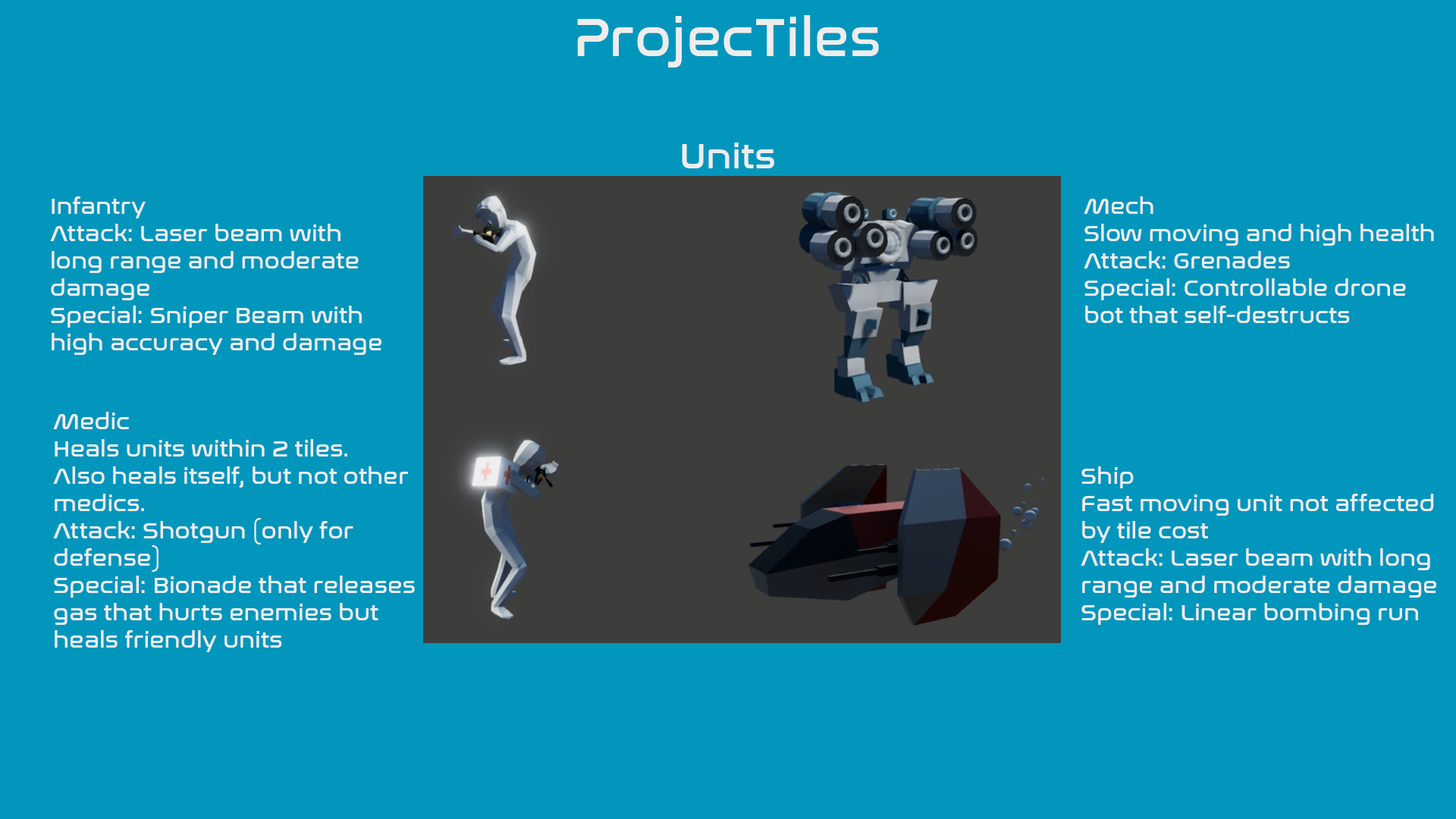
<style>
.page{position:relative;width:1456px;height:819px;background:#0296bd}
.page>*{position:absolute;margin:0}
.t1{font:54.6px "NasalizationRg-Regular";color:#ededed}
.t2{font:36.4px "NasalizationRg-Regular";color:#ededed}
.t3{font:22.7px "NasalizationRg-Regular";color:#ededed}
</style>
<div class="page">
<p class="t1" style="left:577px;top:15px;width:302px;height:52px">ProjecTiles</p>
<p class="t2" style="left:682px;top:143px;width:92px;height:25px">Units</p>
<p class="t3" style="left:50px;top:196px;width:331px;height:159px">Infantry<br>Attack: Laser beam with <br>long range and moderate <br>damage<br>Special: Sniper Beam with <br>high accuracy and damage</p>
<p class="t3" style="left:1084px;top:196px;width:350px;height:127px">Mech<br>Slow moving and high health<br>Attack: Grenades<br>Special: Controllable drone<br>bot that self-destructs</p>
<p class="t3" style="left:53px;top:412px;width:362px;height:240px">Medic<br>Heals units within 2 tiles.<br>Also heals itself, but not other<br>medics.<br>Attack: Shotgun (only for<br>defense)<br>Special: Bionade that releases<br>gas that hurts enemies but<br>heals friendly units</p>
<p class="t3" style="left:1081px;top:466px;width:355px;height:159px">Ship<br>Fast moving unit not affected<br>by tile cost<br>Attack: Laser beam with long<br>range and moderate damage<br>Special: Linear bombing run</p>
</div>
